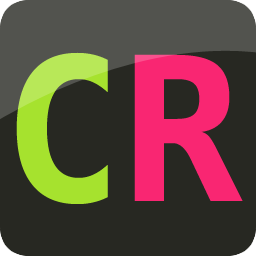
<style>
.page{position:relative;width:256px;height:256px;background:#272822}
.page>*{position:absolute;margin:0}
.t1{font:200px "DejaVuSansMono-Bold";color:#a6e22e}
.t2{font:200px "DejaVuSansMono-Bold";color:#f92672}
</style>
<div class="page">
<p class="t1" style="left:16px;top:52px;width:227px;height:152px">C<span class="t2">R</span></p>
</div>
